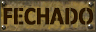
<style>
.page{position:relative;width:96px;height:32px}
.page>*{position:absolute;margin:0}
.t1{font:25.3px "Calibri-Bold";letter-spacing:-0.02em;color:#2c1500;font-weight:bold;scale:0.89 1}
</style>
<div class="page">
<p class="t1" style="left:3px;top:7px;width:90px;height:18px">FECHADO</p>
</div>
